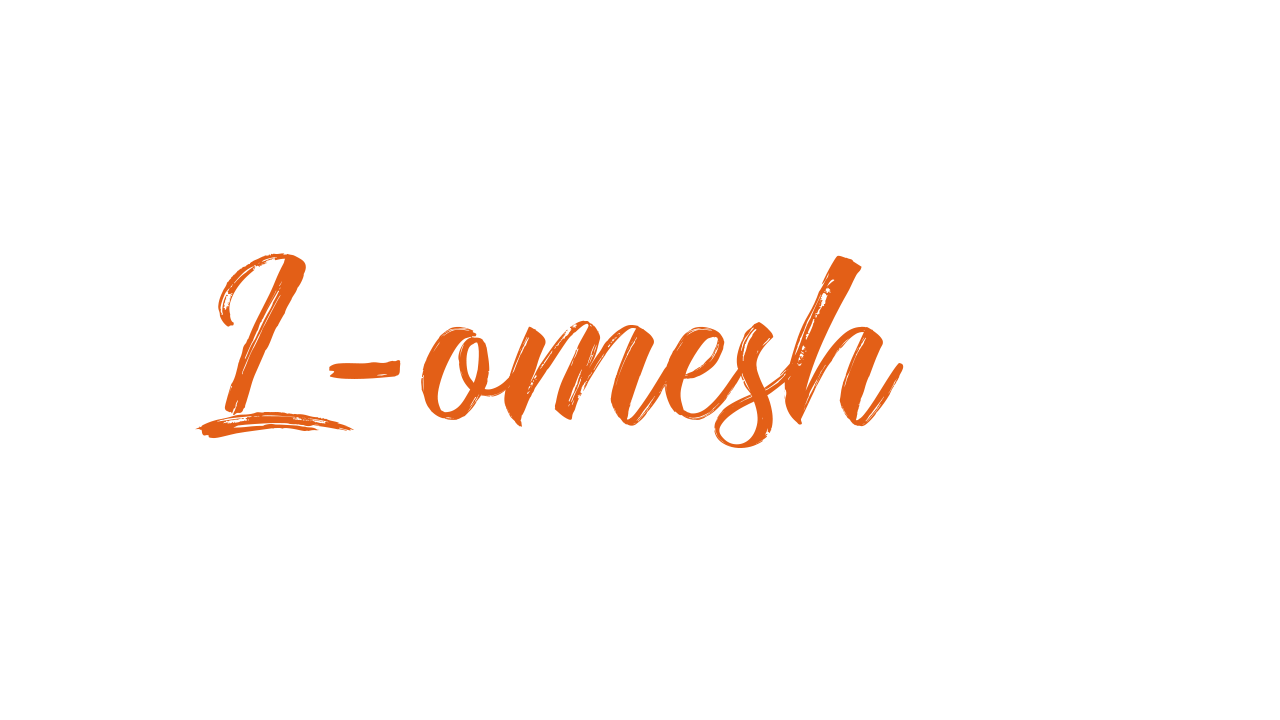
<style>
.page{position:relative;width:1280px;height:720px;background:#ffffff}
.page>*{position:absolute;margin:0}
.t1{font:220px "TheRedlightFree";letter-spacing:0.005em;color:#e35f17;text-transform:uppercase}
.t2{font:250px "TheRedlightFree";letter-spacing:0.005em;color:#e35f17}
.t3{font:240px "TheRedlightFree";letter-spacing:0.005em;color:#e35f17}
</style>
<div class="page">
<p class="t1" style="left:195px;top:253px;width:159px;height:186px">L</p>
<p class="t2" style="left:421px;top:255px;width:483px;height:193px">omesh</p>
<p class="t3" style="left:329px;top:360px;width:72px;height:19px">-</p>
</div>
